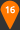
<style>
.page{position:relative;width:20px;height:30px;background:#ff7800}
.page>*{position:absolute;margin:0}
.t1{font:9px "OpenSans";color:#ffffff;font-weight:bold}
</style>
<div class="page">
<p class="t1" style="left:5px;top:6px;width:10px;height:8px">16</p>
</div>
